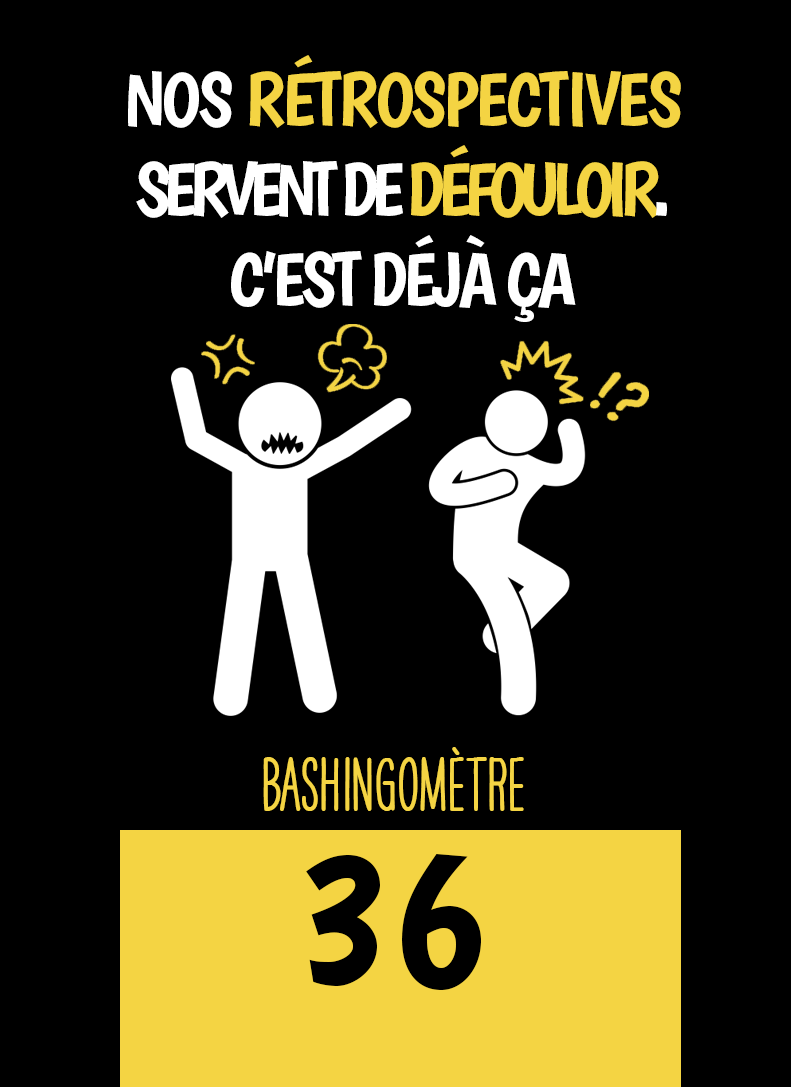
<style>
.page{position:relative;width:791px;height:1087px;background:#000000}
.page>*{position:absolute;margin:0}
.t1{font:75px "Boogaloo-Regular";letter-spacing:-0.04em;color:#f4d443}
.t2{font:75px "Boogaloo-Regular";letter-spacing:-0.04em;color:#ffffff}
.t3{font:75px "Boogaloo-Regular";letter-spacing:-0.1em;color:#ffffff}
.t4{font:75px "Boogaloo-Regular";letter-spacing:-0.1em;color:#f4d443}
.t5{font:75px "Boogaloo-Regular";letter-spacing:-0.06em;color:#ffffff}
.t6{font:66.7px "HAVEANICEDAYTallW04-Bold";color:#f4d443}
.t7{font:200px "Boogaloo-Regular";color:#000000}
</style>
<div class="page">
<p class="t1" style="left:128px;top:55px;width:553px;height:267px;text-align:center"><span class="t2">NOS </span>RÉTROSPECTIVES <span class="t3">SERVENT DE </span><span class="t4">DÉFOULOIR</span><span class="t3">.</span><span class="t5"> C’EST DÉJÀ ÇA</span></p>
<p class="t6" style="left:263px;top:747px;width:261px;height:64px">BASHINgomètre</p>
<p class="t7" style="left:306px;top:854px;width:175px;height:136px">36</p>
</div>
